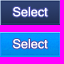
<style>
.page{position:relative;width:64px;height:64px;background:#ff00ff}
.page>*{position:absolute;margin:0}
.t1{font:20px "Kartika";color:#ffffff}
</style>
<div class="page">
<p class="t1" style="left:13px;top:7px;width:35px;height:10px">Select</p>
<p class="t1" style="left:13px;top:39px;width:35px;height:10px">Select</p>
</div>
